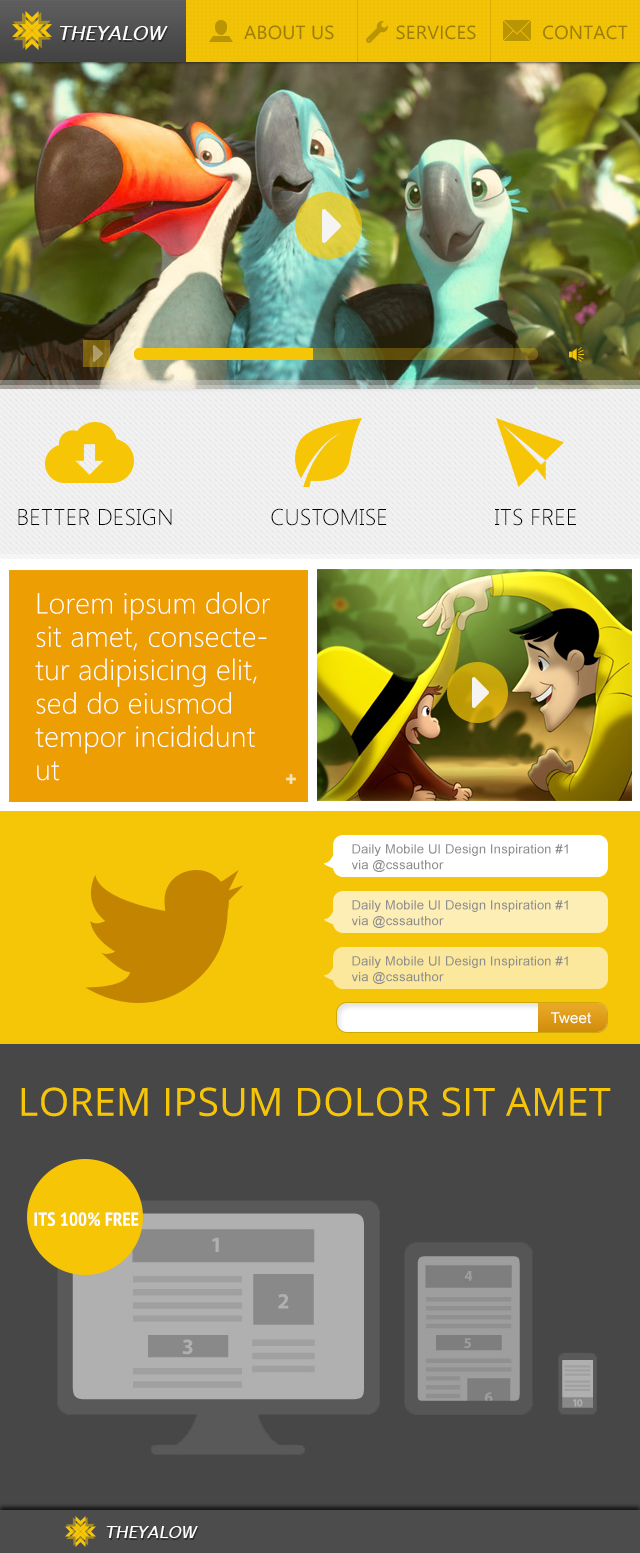
<style>
.page{position:relative;width:640px;height:1553px}
.page>*{position:absolute;margin:0}
.t1{font:19.3px "LucidaSans-Italic";letter-spacing:0.01em;color:#ffffff;text-transform:uppercase}
.t2{font:19px "SegoeWP";letter-spacing:0.01em;color:#9b7d08;text-transform:uppercase}
.t3{font:23px "SegoeUI-Light";letter-spacing:0.01em;color:#000000;text-transform:uppercase}
.t4{font:29px/33.3px "SegoeWP-Light";letter-spacing:0.01em;color:#ffffff}
.t5{font:13px "ArialMT";letter-spacing:0.01em;color:#8f8e8e}
.t6{font:15px "ArialMT";letter-spacing:0.01em;color:#ffffff}
.t7{font:39px "OpenSans";letter-spacing:0.01em;color:#f5c506;text-transform:uppercase}
.t8{font:18.7px "PTSans-NarrowBold";letter-spacing:0.01em;color:#ffffff;text-transform:uppercase}
.t9{font:16.7px "LucidaSans-Italic";letter-spacing:0.01em;color:#ffffff;text-transform:uppercase}
</style>
<div class="page">
<p class="t1" style="left:60px;top:26px;width:108px;height:14px">TheYalow</p>
<p class="t2" style="left:244px;top:25px;width:90px;height:15px">About Us</p>
<p class="t2" style="left:396px;top:25px;width:80px;height:15px">Services</p>
<p class="t2" style="left:543px;top:25px;width:85px;height:15px">Contact</p>
<p class="t3" style="left:18px;top:508px;width:154px;height:18px">better design</p>
<p class="t3" style="left:271px;top:508px;width:116px;height:18px">Customise</p>
<p class="t3" style="left:495px;top:508px;width:81px;height:18px">Its Free</p>
<p class="t4" style="left:35px;top:592px;width:235px;height:189px">Lorem ipsum dolor sit amet, consectetur adipisicing elit, sed do eiusmod tempor incididunt ut</p>
<p class="t5" style="left:351px;top:844px;width:217px;height:28px">Daily Mobile UI Design Inspiration #1 <br>via @cssauthor</p>
<p class="t5" style="left:351px;top:900px;width:217px;height:28px">Daily Mobile UI Design Inspiration #1 <br>via @cssauthor</p>
<p class="t5" style="left:351px;top:956px;width:217px;height:28px">Daily Mobile UI Design Inspiration #1 <br>via @cssauthor</p>
<p class="t6" style="left:551px;top:1012px;width:40px;height:12px">Tweet</p>
<p class="t7" style="left:21px;top:1087px;width:590px;height:30px">Lorem ipsum dolor sit amet</p>
<p class="t8" style="left:34px;top:1212px;width:105px;height:14px">Its 100% Free</p>
<p class="t9" style="left:106px;top:1526px;width:92px;height:12px">TheYalow</p>
</div>
